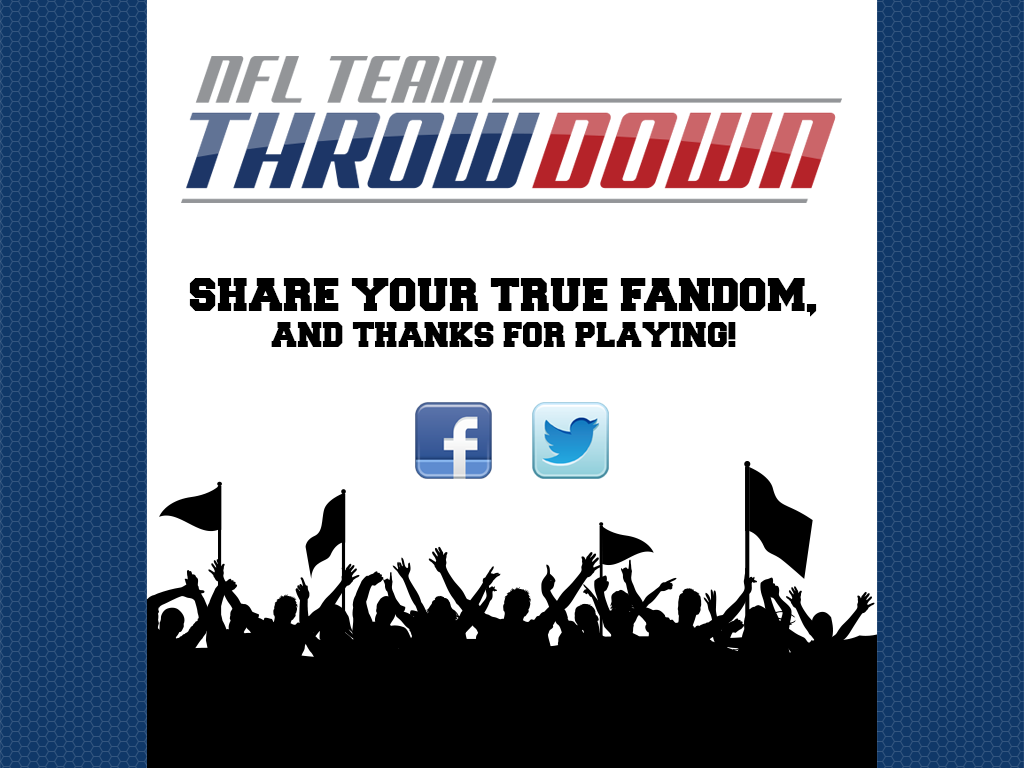
<style>
.page{position:relative;width:1024px;height:768px;background:#ffffff}
.page>*{position:absolute;margin:0}
.t1{font:40px "Freshman";color:#000000}
.t2{font:30px "Freshman";color:#000000}
</style>
<div class="page">
<p class="t1" style="left:189px;top:278px;width:628px;height:69px;text-align:center">SHARE YOUR TRUE FANDOM,<br><span class="t2">AND THANKS FOR PLAYING!</span></p>
</div>
